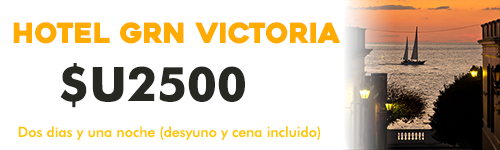
<style>
.page{position:relative;width:500px;height:150px;background:#ffffff}
.page>*{position:absolute;margin:0}
.t1{font:27.7px "Heavitas";color:#ffab00}
.t2{font:47.5px "FuturaBT-Bold";color:#272822}
.t3{font:13.9px "FuturaBT-Medium";color:#fec901}
</style>
<div class="page">
<p class="t1" style="left:13px;top:22px;width:327px;height:22px">Hotel grn victoria</p>
<p class="t2" style="left:60px;top:63px;width:185px;height:45px">$U2500</p>
<p class="t3" style="left:18px;top:126px;width:302px;height:14px">Dos días y una noche (desyuno y cena incluido)</p>
</div>
